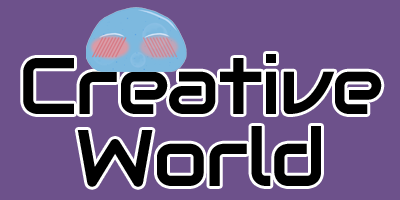
<style>
.page{position:relative;width:400px;height:200px;background:#6d518b}
.page>*{position:absolute;margin:0}
.t1{font:80px "Audiowide-Regular";letter-spacing:-0.025em;color:#000000}
</style>
<div class="page">
<p class="t1" style="left:23px;top:54px;width:359px;height:133px">Creative World</p>
</div>
